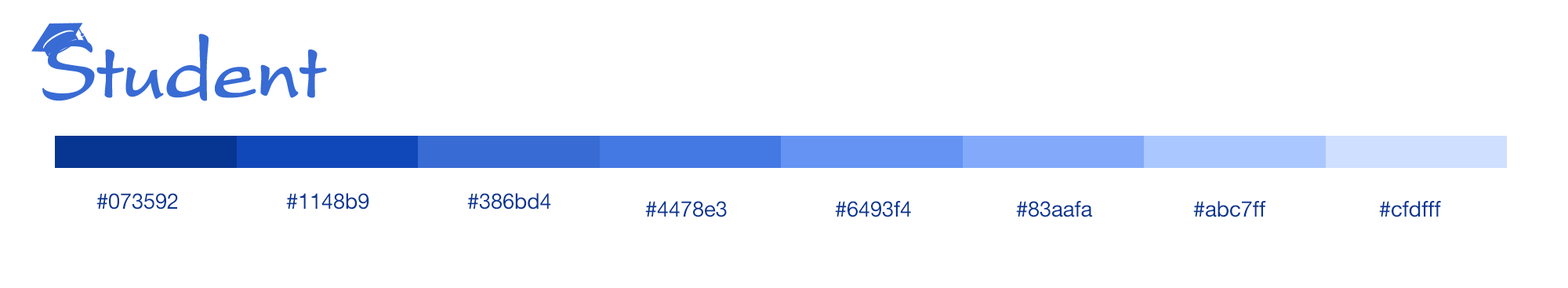
<style>
.page{position:relative;width:1568px;height:288px;background:#ffffff}
.page>*{position:absolute;margin:0}
.t1{font:32.7px "PSL-Text";color:#073592}
</style>
<div class="page">
<p class="t1" style="left:96px;top:193px;width:82px;height:16px">#073592</p>
<p class="t1" style="left:286px;top:193px;width:83px;height:16px">#1148b9</p>
<p class="t1" style="left:467px;top:193px;width:84px;height:16px">#386bd4</p>
<p class="t1" style="left:645px;top:201px;width:82px;height:16px">#4478e3</p>
<p class="t1" style="left:835px;top:201px;width:76px;height:16px">#6493f4</p>
<p class="t1" style="left:1016px;top:201px;width:76px;height:16px">#83aafa</p>
<p class="t1" style="left:1193px;top:201px;width:73px;height:16px">#abc7ff</p>
<p class="t1" style="left:1379px;top:201px;width:62px;height:16px">#cfdfff</p>
</div>
